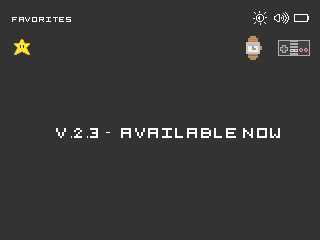
<style>
.page{position:relative;width:320px;height:240px;background:#333333}
.page>*{position:absolute;margin:0}
.t1{font:8px "5x5-Pixel";letter-spacing:0.1em;color:#ffffff}
.t2{font:16px "5x5-Pixel";letter-spacing:0.1em;color:#ffffff;text-transform:uppercase}
.t3{font:16px "MyriadPro-Regular";letter-spacing:0.1em;color:#ffffff;text-transform:uppercase}
</style>
<div class="page">
<p class="t1" style="left:12px;top:17px;width:59px;height:5px">Favorites</p>
<p class="t2" style="left:56px;top:128px;width:224px;height:10px">v<span class="t3">.</span>2<span class="t3">.</span>3<span class="t3"> - </span> available now</p>
</div>
